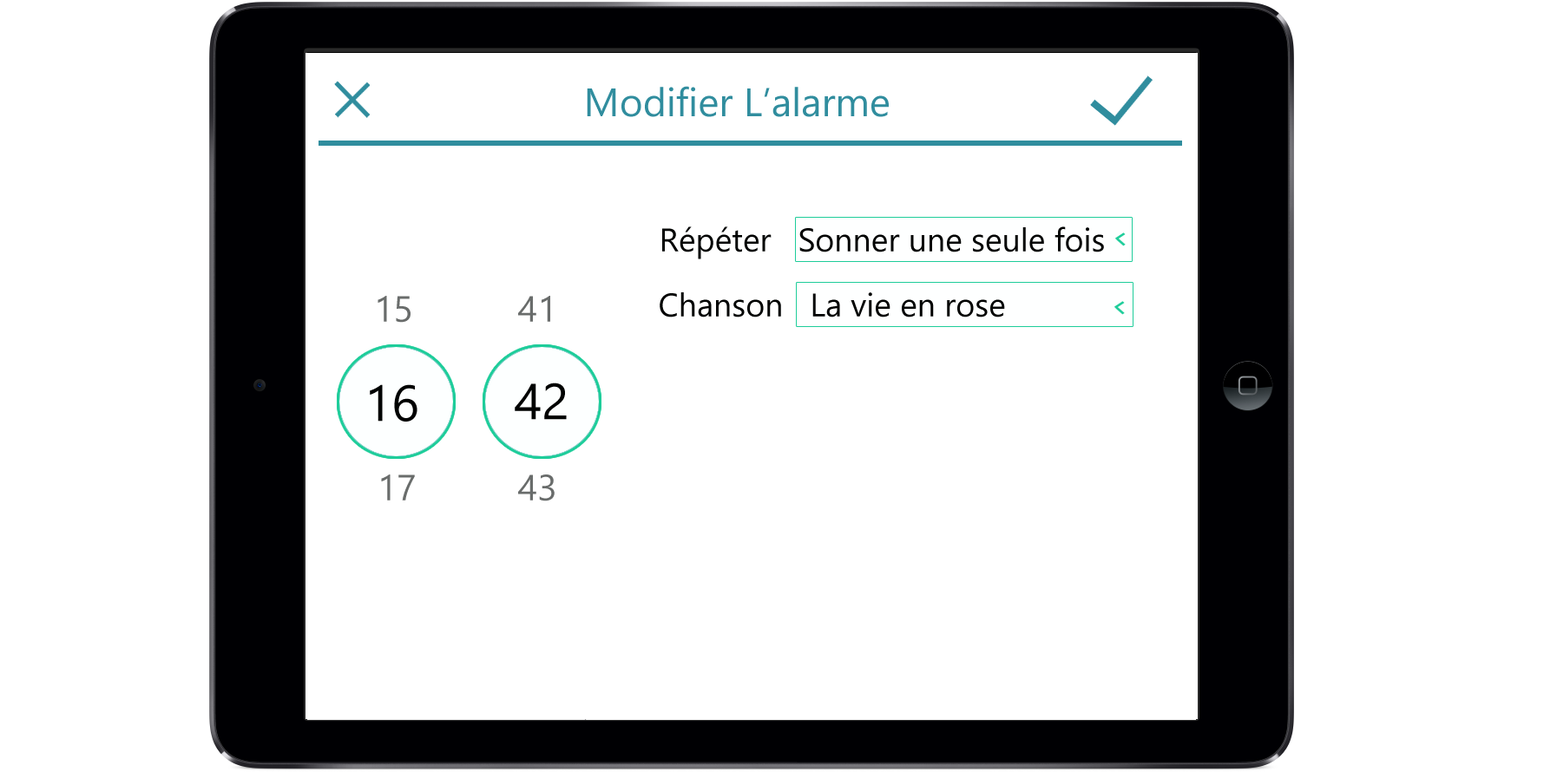
<style>
.page{position:relative;width:1544px;height:772px;background:#ffffff}
.page>*{position:absolute;margin:0}
.t1{font:39.8px "NirmalaUI";color:#308d9e}
.t2{font:32.5px "NirmalaUI";color:#000201}
.t3{font:36.2px "NirmalaUI";color:#696c6b}
.t4{font:50.6px "NirmalaUI";color:#000201}
</style>
<div class="page">
<p class="t1" style="left:587px;top:86px;width:302px;height:31px">Modifier L’alarme</p>
<p class="t2" style="left:662px;top:227px;width:442px;height:32px">Répéter   Sonner une seule fois</p>
<p class="t2" style="left:660px;top:292px;width:345px;height:26px">Chanson   La vie en rose</p>
<p class="t3" style="left:378px;top:296px;width:32px;height:27px">15</p>
<p class="t3" style="left:518px;top:296px;width:32px;height:26px">41</p>
<p class="t4" style="left:370px;top:384px;width:47px;height:38px">16</p>
<p class="t4" style="left:515px;top:383px;width:52px;height:37px">42</p>
<p class="t3" style="left:381px;top:475px;width:34px;height:26px">17</p>
<p class="t3" style="left:518px;top:475px;width:37px;height:27px">43</p>
</div>
